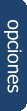
<style>
.page{position:relative;width:27px;height:111px;background:#1e436e}
.page>*{position:absolute;margin:0}
.t1{font:19px "Tahoma";color:#ffffff}
</style>
<div class="page">
<p class="t1" style="left:4px;top:20px;width:18px;height:73px;rotate:90deg">opciones</p>
</div>
